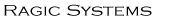
<style>
.page{position:relative;width:180px;height:20px;background:#ffffff}
.page>*{position:absolute;margin:0}
.t1{font:16px "CopperplateGothic-Light";color:#000000;scale:1.2 1}
</style>
<div class="page">
<p class="t1" style="left:4px;top:4px;width:148px;height:12px">Ragic Systems</p>
</div>
